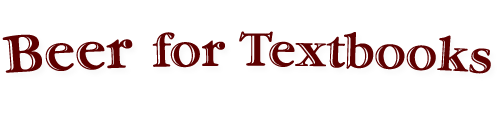
<style>
.page{position:relative;width:500px;height:120px;background:#ffffff}
.page>*{position:absolute;margin:0}
.t1{font:48px "GaramondStd-HandtooledBold";color:#5e0000}
.t2{font:55px "GaramondStd-HandtooledBold";color:#5e0000}
</style>
<div class="page">
<p class="t1" style="left:2px;top:31px;width:489px;height:43px"><span class="t2">Beer </span>for Textbooks</p>
</div>
